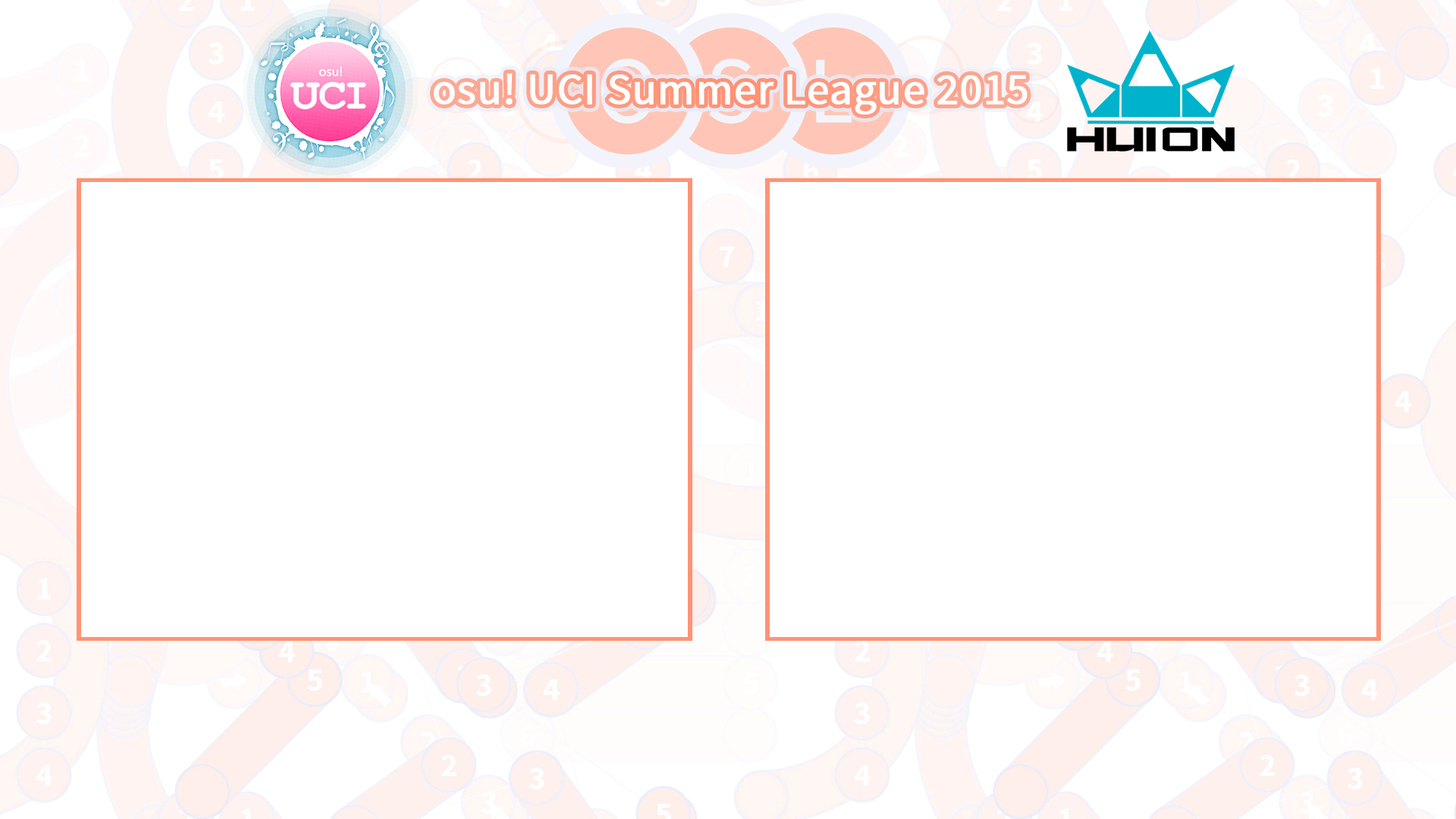
<style>
.page{position:relative;width:1456px;height:819px;background:#ffffff}
.page>*{position:absolute;margin:0}
.t1{font:44.7px "SourceSansPro-Regular";color:#ffffff;font-weight:bold}
</style>
<div class="page">
<p class="t1" style="left:434px;top:73px;width:594px;height:42px">osu! UCI Summer League 2015</p>
<p class="t1" style="left:434px;top:73px;width:594px;height:42px">osu! UCI Summer League 2015</p>
</div>
